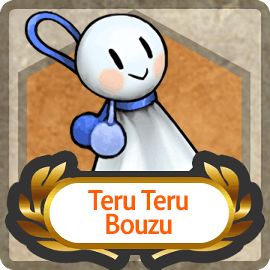
<style>
.page{position:relative;width:270px;height:270px}
.page>*{position:absolute;margin:0}
.t1{font:30px/24px "AdobeClean-Bold";letter-spacing:-0.04em;color:#ff5d00;scale:0.9 1}
</style>
<div class="page">
<p class="t1" style="left:88px;top:190px;width:100px;height:45px;text-align:center">Teru Teru<br>Bouzu</p>
</div>
